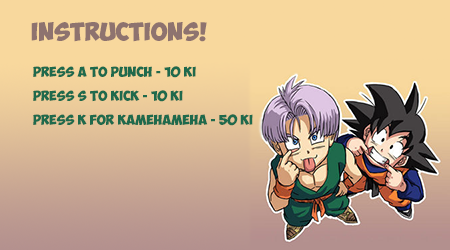
<style>
.page{position:relative;width:450px;height:250px;background:#f8d89d}
.page>*{position:absolute;margin:0}
.t1{font:18px "ObelixPro-Bold";color:#8e736f}
.t2{font:10px "ObelixPro-Bold";color:#1f6a4c}
</style>
<div class="page">
<p class="t1" style="left:31px;top:22px;width:176px;height:20px">Instructions!</p>
<p class="t2" style="left:33px;top:66px;width:220px;height:60px">Press a to punch - 10 ki<br><br>press s to kick - 10 ki<br><br>press k for kamehameha - 50 ki</p>
</div>
